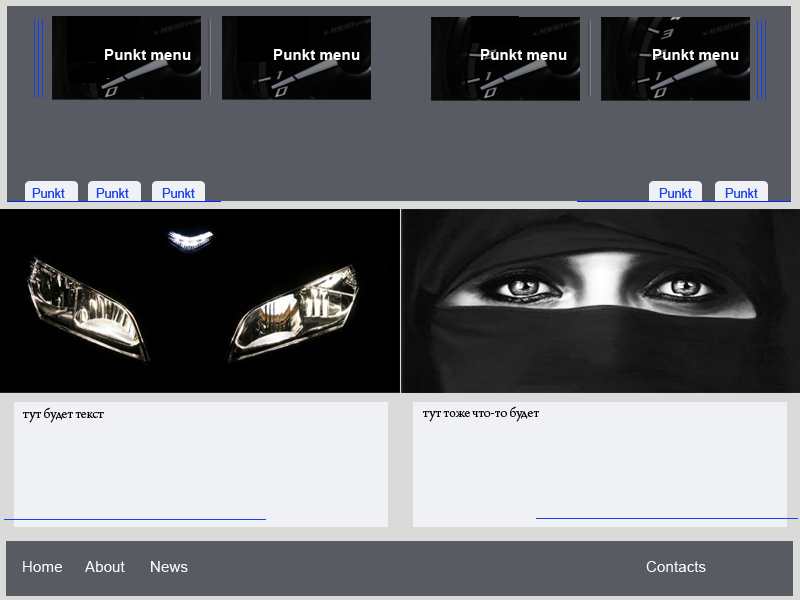
<style>
.page{position:relative;width:800px;height:600px;background:#585c62}
.page>*{position:absolute;margin:0}
.t1{font:15.2px "Arial-BoldMT";color:#ffffff}
.t2{font:12.7px "ArialMT";color:#1840ed}
.t3{font:15.2px "ArnoPro-LightDisplay";color:#000000}
.t4{font:15.2px "ArialMT";color:#ffffff}
</style>
<div class="page">
<p class="t1" style="left:105px;top:49px;width:86px;height:11px">Punkt menu</p>
<p class="t1" style="left:274px;top:49px;width:86px;height:11px">Punkt menu</p>
<p class="t1" style="left:481px;top:49px;width:86px;height:11px">Punkt menu</p>
<p class="t1" style="left:653px;top:49px;width:86px;height:11px">Punkt menu</p>
<p class="t2" style="left:32px;top:188px;width:33px;height:10px">Punkt</p>
<p class="t2" style="left:96px;top:188px;width:33px;height:10px">Punkt</p>
<p class="t2" style="left:162px;top:188px;width:33px;height:10px">Punkt</p>
<p class="t2" style="left:659px;top:188px;width:33px;height:10px">Punkt</p>
<p class="t2" style="left:725px;top:188px;width:33px;height:10px">Punkt</p>
<p class="t3" style="left:22px;top:407px;width:82px;height:16px">тут будет текст</p>
<p class="t3" style="left:422px;top:406px;width:117px;height:16px">тут тоже что-то будет</p>
<p class="t4" style="left:23px;top:561px;width:39px;height:11px">Home</p>
<p class="t4" style="left:85px;top:561px;width:40px;height:11px">About</p>
<p class="t4" style="left:151px;top:561px;width:37px;height:11px">News</p>
<p class="t4" style="left:646px;top:561px;width:60px;height:11px">Contacts</p>
</div>
